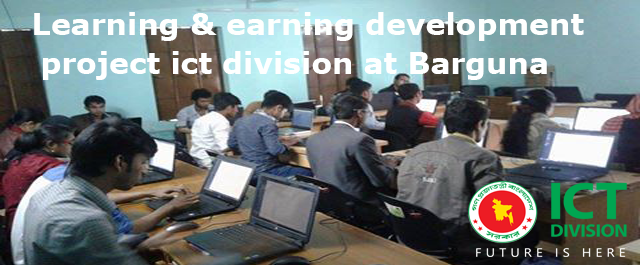
<style>
.page{position:relative;width:640px;height:265px}
.page>*{position:absolute;margin:0}
.t1{font:30px "Verdana-Bold";color:#fefffe}
.t2{font:30px "Verdana-Bold";color:#feffff}
</style>
<div class="page">
<p class="t1" style="left:34px;top:12px;width:550px;height:29px">Learning &amp; earning development</p>
<p class="t2" style="left:43px;top:51px;width:504px;height:29px">project ict division at Barguna</p>
</div>
